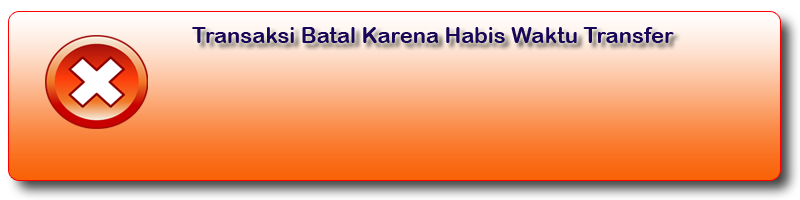
<style>
.page{position:relative;width:800px;height:200px}
.page>*{position:absolute;margin:0}
.t1{font:22px "ArialRoundedMTBold";color:#190659}
</style>
<div class="page">
<p class="t1" style="left:192px;top:27px;width:482px;height:16px">Transaksi Batal Karena Habis Waktu Transfer</p>
</div>
